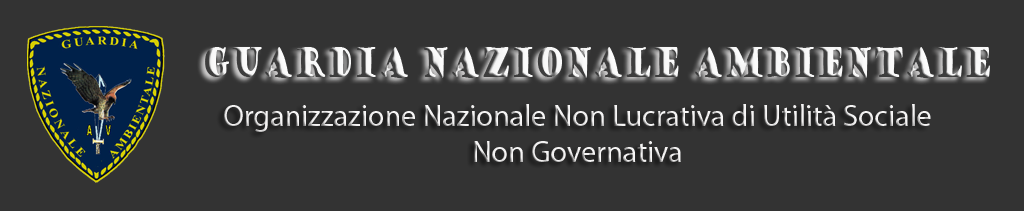
<style>
.page{position:relative;width:1024px;height:211px;background:#333333}
.page>*{position:absolute;margin:0}
.t1{font:39.3px "GoudyStout";scale:0.61 1}
.t2{font:30px "MyriadPro-Regular";color:#f3f2f2}
</style>
<div class="page">
<p class="t1" style="left:205px;top:47px;width:785px;height:31px">Guardia Nazionale Ambientale</p>
<p class="t2" style="left:224px;top:104px;width:707px;height:58px;text-align:center">Organizzazione Nazionale Non Lucrativa di Utilità Sociale<br>Non Governativa</p>
</div>
